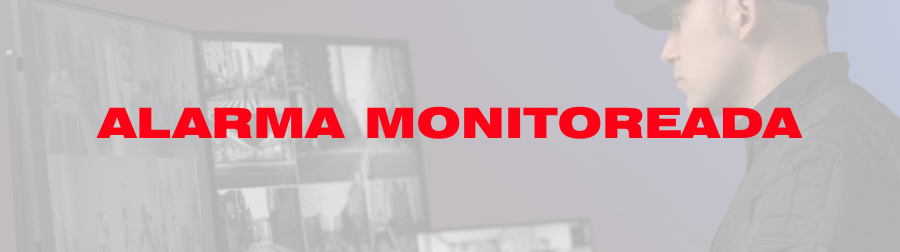
<style>
.page{position:relative;width:900px;height:252px}
.page>*{position:absolute;margin:0}
.t1{font:42px "Swiss721BT-BlackExtended";color:#ff0116}
</style>
<div class="page">
<p class="t1" style="left:96px;top:106px;width:707px;height:33px">ALARMA MONITOREADA</p>
</div>
